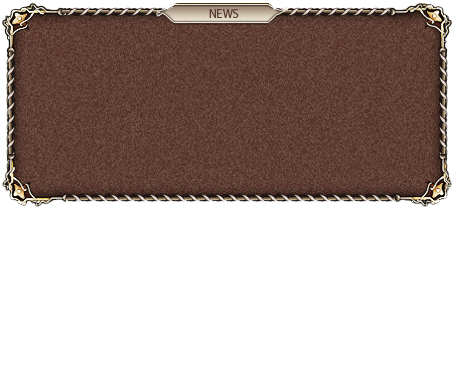
<style>
.page{position:relative;width:454px;height:380px;background:#ffffff}
.page>*{position:absolute;margin:0}
.t1{font:12px "MyriadPro-Regular";color:#5b3b30}
</style>
<div class="page">
<p class="t1" style="left:209px;top:9px;width:30px;height:9px">NEWS</p>
</div>
